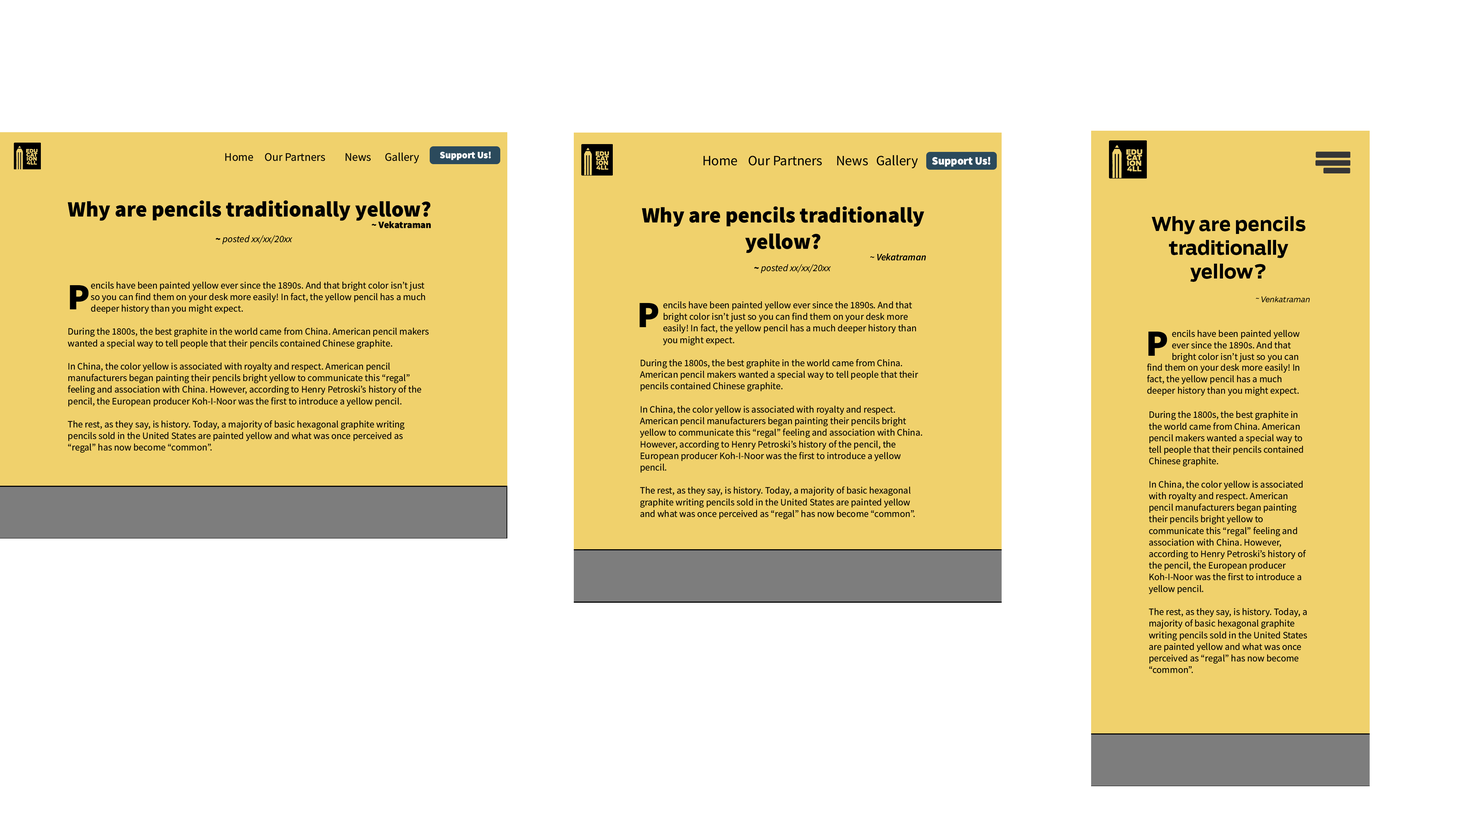
<style>
.page{position:relative;width:1464px;height:814px;background:#ffffff}
.page>*{position:absolute;margin:0}
.t1{font:11.5px "SourceSansRoman-Regular";color:#000000}
.t2{font:9.6px "SourceSansRoman-Black";color:#ffffff}
.t3{font:14.1px "SourceSansRoman-Regular";color:#000000}
.t4{font:21.9px "SourceSansRoman-Black";color:#000000}
.t5{font:9.7px "SourceSansRoman-Black";color:#000000}
.t6{font:9.7px "SourceSansItalic-SemiboldItalic";color:#000000}
.t7{font:18.9px/23.8px "Boomer-Bold";color:#000000}
.t8{font:18.9px/23.8px "Boomer-Bold";letter-spacing:-0.015em;color:#000000}
.t9{font:7.8px/23.8px "Boomer-BookItalic";color:#000000}
.t10{font:9.7px "SourceSansItalic-Italic";color:#000000}
.t11{font:9.7px "SourceSansRoman-Regular";color:#000000}
.t12{font:37.2px "SourceSansRoman-Black";color:#000000}
</style>
<div class="page">
<p class="t1" style="left:225px;top:152px;width:194px;height:11px">Home Our Partners  News  Gallery</p>
<p class="t2" style="left:440px;top:152px;width:51px;height:8px">Support Us!</p>
<p class="t3" style="left:704px;top:155px;width:214px;height:14px">Home   Our Partners  News Gallery</p>
<p class="t4" style="left:68px;top:200px;width:363px;height:28px;text-align:right">Why are pencils traditionally yellow?<span class="t5"><br>~ Vekatraman</span></p>
<p class="t4" style="left:642px;top:206px;width:284px;height:55px;text-align:center">Why are pencils traditionally yellow?<br><span class="t6">~ Vekatraman</span></p>
<p class="t7" style="left:1152px;top:216px;width:158px;height:86px;text-align:center">Why are pencils <span class="t8">traditionally</span> yellow?<br><span class="t9">~ Venkatraman</span></p>
<p class="t10" style="left:215px;top:235px;width:78px;height:9px"><span class="t5">~ </span>posted xx/xx/20xx</p>
<p class="t10" style="left:754px;top:264px;width:77px;height:9px"><span class="t5">~ </span>posted xx/xx/20xx</p>
<p class="t11" style="left:68px;top:282px;width:361px;height:171px">encils have been painted yellow ever since the 1890s. And that bright color isn’t just so you can find them on your desk more easily! In fact, the yellow pencil has a much deeper history than you might expect.<br><br>During the 1800s, the best graphite in the world came from China. American pencil makers wanted a special way to tell people that their pencils contained Chinese graphite.<br><br>In China, the color yellow is associated with royalty and respect. American pencil manufacturers began painting their pencils bright yellow to communicate this “regal” feeling and association with China. However, according to Henry Petroski’s history of the pencil, the European producer Koh-I-Noor was the first to introduce a yellow pencil.<br><br>The rest, as they say, is history. Today, a majority of basic hexagonal graphite writing pencils sold in the United States are painted yellow and what was once perceived as “regal” has now become “common”.</p>
<p class="t12" style="left:70px;top:285px;width:19px;height:24px">P</p>
<p class="t12" style="left:640px;top:303px;width:19px;height:24px">P</p>
<p class="t11" style="left:640px;top:301px;width:282px;height:218px">encils have been painted yellow ever since the 1890s. And that bright color isn’t just so you can find them on your desk more easily! In fact, the yellow pencil has a much deeper history than you might expect.<br><br>During the 1800s, the best graphite in the world came from China. American pencil makers wanted a special way to tell people that their pencils contained Chinese graphite.<br><br>In China, the color yellow is associated with royalty and respect. American pencil manufacturers began painting their pencils bright yellow to communicate this “regal” feeling and association with China. However, according to Henry Petroski’s history of the pencil, the European producer Koh-I-Noor was the first to introduce a yellow pencil.<br><br>The rest, as they say, is history. Today, a majority of basic hexagonal graphite writing pencils sold in the United States are painted yellow and what was once perceived as “regal” has now become “common”.</p>
<p class="t11" style="left:1149px;top:330px;width:159px;height:343px">encils have been painted yellow ever since the 1890s. And that bright color isn’t just so you can <br><br><br><br><br>During the 1800s, the best graphite in the world came from China. American pencil makers wanted a special way to tell people that their pencils contained Chinese graphite.<br><br>In China, the color yellow is associated with royalty and respect. American pencil manufacturers began painting their pencils bright yellow to communicate this “regal” feeling and association with China. However, according to Henry Petroski’s history of the pencil, the European producer Koh-I-Noor was the first to introduce a yellow pencil.<br><br>The rest, as they say, is history. Today, a majority of basic hexagonal graphite writing pencils sold in the United States are painted yellow and what was once perceived as “regal” has now become “common”.</p>
<p class="t12" style="left:1149px;top:331px;width:19px;height:25px">P</p>
<p class="t11" style="left:1147px;top:364px;width:153px;height:32px">find them on your desk more easily! In fact, the yellow pencil has a much deeper history than you might expect.</p>
</div>
